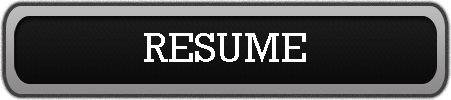
<style>
.page{position:relative;width:451px;height:100px}
.page>*{position:absolute;margin:0}
.t1{font:41.7px "Rockwell";color:#ffffff}
</style>
<div class="page">
<p class="t1" style="left:144px;top:33px;width:162px;height:29px">RESUME</p>
</div>
